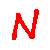
<style>
.page{position:relative;width:50px;height:50px;background:#ffffff}
.page>*{position:absolute;margin:0}
.t1{font:36px "SegoeScript";color:#ff0000;font-weight:bold}
</style>
<div class="page">
<p class="t1" style="left:12px;top:9px;width:27px;height:31px">N</p>
</div>
